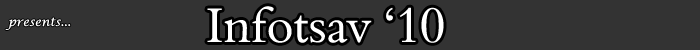
<style>
.page{position:relative;width:700px;height:50px;background:#333333}
.page>*{position:absolute;margin:0}
.t1{font:50px "00243";color:#ffffff}
.t2{font:12px "LucidaCalligraphy-Italic";color:#ffffff}
</style>
<div class="page">
<p class="t1" style="left:207px;top:6px;width:237px;height:37px">Infotsav ‘10</p>
<p class="t2" style="left:5px;top:17px;width:66px;height:13px">presents...</p>
</div>
